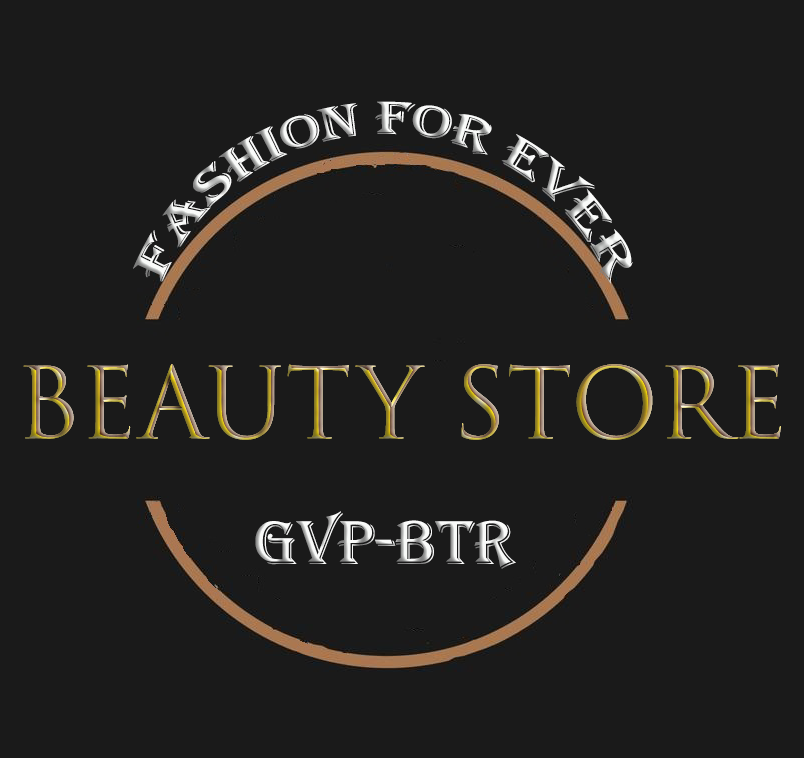
<style>
.page{position:relative;width:804px;height:758px;background:#1a1a1a}
.page>*{position:absolute;margin:0}
.t1{font:48px "Algerian"}
.t2{font:96px "TrajanColor-Concept"}
.t3{font:64px "Algerian"}
</style>
<div class="page">
<p class="t1" style="left:133px;top:101px;width:500px;height:183px">FASHION FOR EVER</p>
<p class="t2" style="left:23px;top:364px;width:758px;height:76px">Beauty Store</p>
<p class="t3" style="left:255px;top:511px;width:261px;height:58px">gVP-BTR</p>
</div>
